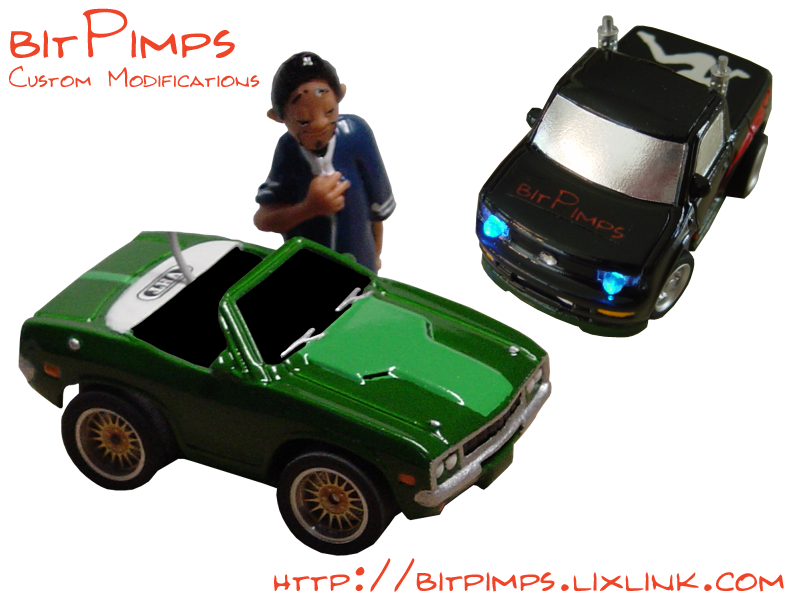
<style>
.page{position:relative;width:800px;height:600px;background:#ffffff}
.page>*{position:absolute;margin:0}
.t1{font:72px "Kilroy-WasHere";color:#ef4427}
.t2{font:30px "Kilroy-WasHere";color:#ef4427}
.t3{font:48px "Kilroy-WasHere";color:#ef4427}
</style>
<div class="page">
<p class="t1" style="left:10px;top:8px;width:225px;height:51px">bitPimps</p>
<p class="t2" style="left:9px;top:65px;width:251px;height:23px">Custom Modifications</p>
<p class="t3" style="left:274px;top:558px;width:510px;height:34px">http://bitpimps.lixlink.com</p>
</div>
